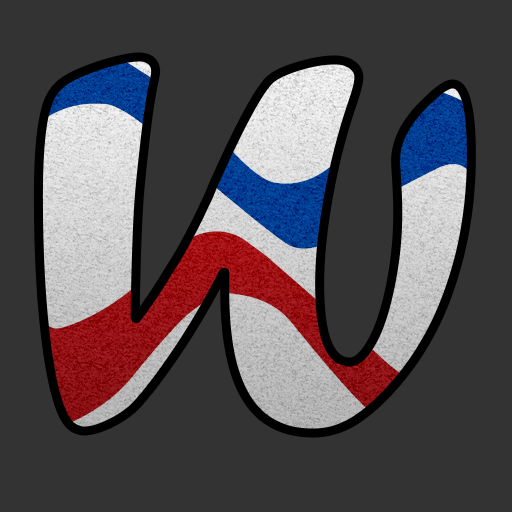
<style>
.page{position:relative;width:512px;height:512px;background:#333333}
.page>*{position:absolute;margin:0}
.t1{font:558.4px "ForteMT";letter-spacing:0.075em;text-transform:uppercase}
</style>
<div class="page">
<p class="t1" style="left:38px;top:56px;width:434px;height:377px">W</p>
</div>
